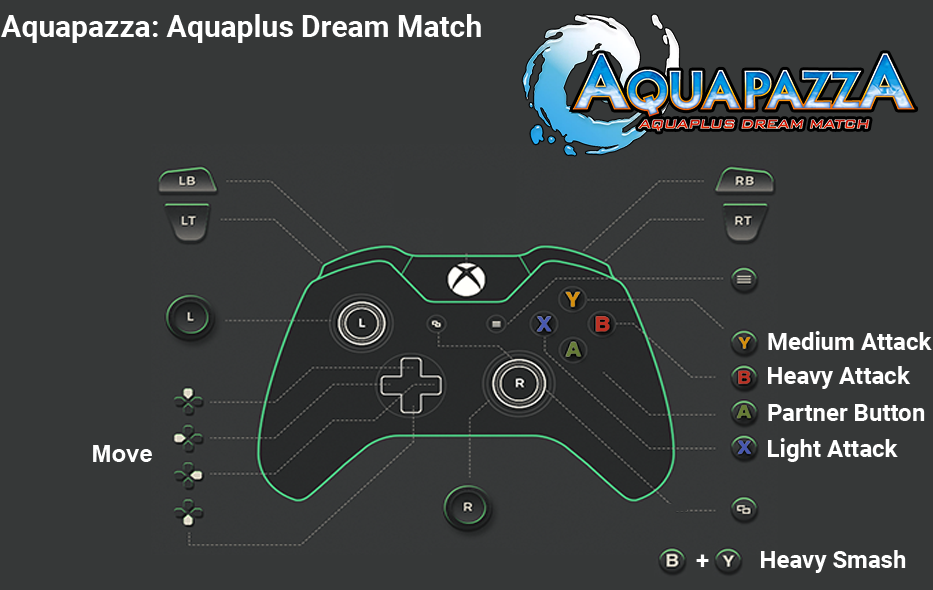
<style>
.page{position:relative;width:933px;height:590px;background:#363838}
.page>*{position:absolute;margin:0}
.t1{font:30px "Roboto-Bold";color:#ffffff}
.t2{font:24px "Roboto-Bold";color:#ffffff}
.t3{font:24px "Arial-BoldMT";color:#fefefe}
.t4{font:24px "Roboto-Bold";color:#fefefe}
</style>
<div class="page">
<p class="t1" style="left:1px;top:14px;width:480px;height:29px">Aquapazza: Aquaplus Dream Match</p>
<p class="t2" style="left:768px;top:331px;width:164px;height:19px">Medium Attack</p>
<p class="t2" style="left:768px;top:366px;width:143px;height:23px">Heavy Attack</p>
<p class="t2" style="left:768px;top:404px;width:157px;height:17px">Partner Button</p>
<p class="t2" style="left:768px;top:438px;width:130px;height:24px">Light Attack</p>
<p class="t3" style="left:93px;top:445px;width:59px;height:17px">Move</p>
<p class="t4" style="left:696px;top:554px;width:13px;height:13px">+</p>
<p class="t2" style="left:761px;top:550px;width:145px;height:23px">Heavy Smash</p>
</div>
